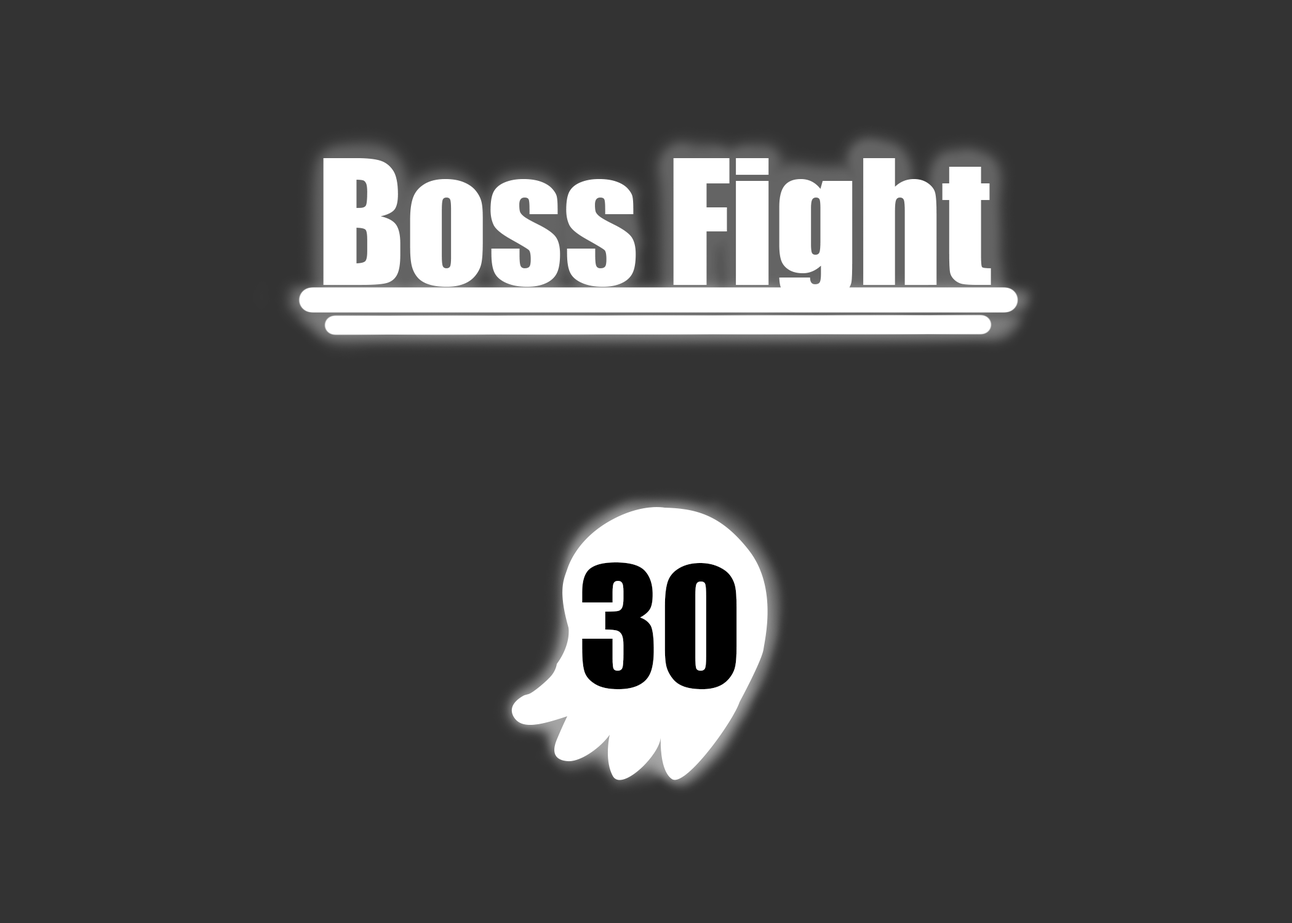
<style>
.page{position:relative;width:1292px;height:923px;background:#333333}
.page>*{position:absolute;margin:0}
.t1{font:160.5px "Impact";color:#ffffff}
.t2{font:153.8px "Impact";color:#000000}
</style>
<div class="page">
<p class="t1" style="left:323px;top:158px;width:668px;height:145px">Boss Fight</p>
<p class="t2" style="left:582px;top:562px;width:155px;height:127px">30</p>
</div>
